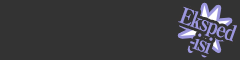
<style>
.page{position:relative;width:240px;height:60px;background:#333333}
.page>*{position:absolute;margin:0}
.t1{font:22px/20px "RyuminPro-ExBold";letter-spacing:-0.08em;color:#9c97de;scale:0.9 1}
</style>
<div class="page">
<p class="t1" style="left:178px;top:6px;width:59px;height:48px;text-align:center;rotate:20deg">Eksped<br>-isi</p>
</div>
